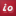
<style>
.page{position:relative;width:16px;height:16px}
.page>*{position:absolute;margin:0}
.t1{font:14px "HarlowSolid";letter-spacing:0.06em;color:#f4f4f4}
</style>
<div class="page">
<p class="t1" style="left:2px;top:3px;width:11px;height:8px">io</p>
</div>
